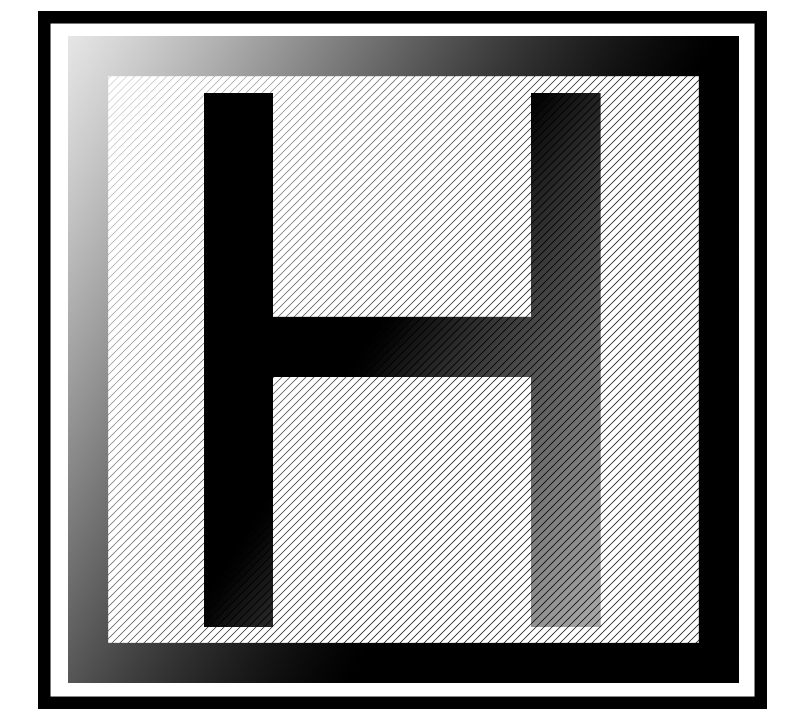
<style>
.page{position:relative;width:806px;height:720px;background:#ffffff}
.page>*{position:absolute;margin:0}
.t1{font:791.7px "MyriadPro-Regular"}
</style>
<div class="page">
<p class="t1" style="left:204px;top:93px;width:397px;height:534px">H</p>
</div>
